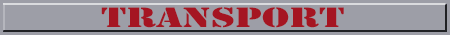
<style>
.page{position:relative;width:450px;height:35px;background:#9d9ea7}
.page>*{position:absolute;margin:0}
.t1{font:26.1px "StencilStd";color:#a51522;scale:1.46 1}
</style>
<div class="page">
<p class="t1" style="left:101px;top:7px;width:243px;height:21px">Transport</p>
</div>
